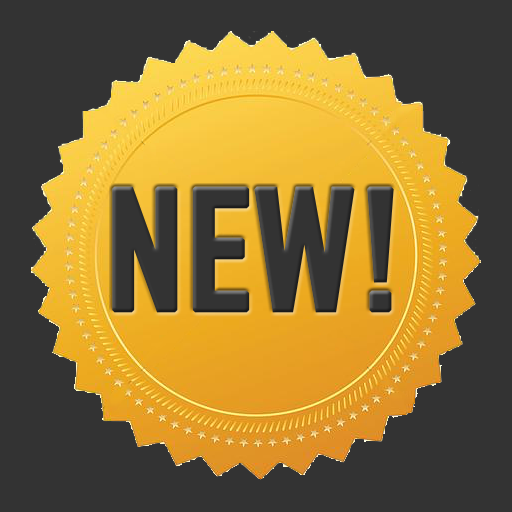
<style>
.page{position:relative;width:512px;height:512px;background:#333333}
.page>*{position:absolute;margin:0}
.t1{font:170px "DINCondensed-Bold";color:#333333;font-weight:bold}
</style>
<div class="page">
<p class="t1" style="left:112px;top:186px;width:282px;height:127px">NEW!</p>
</div>
